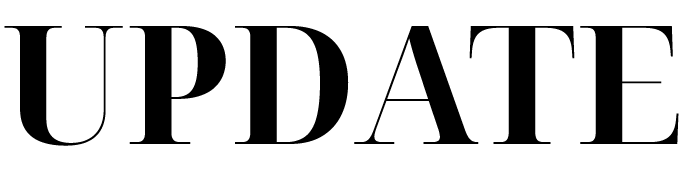
<style>
.page{position:relative;width:681px;height:175px;background:#ffffff}
.page>*{position:absolute;margin:0}
.t1{font:165px "NotoSerifDisplay-Bold";color:#000000}
</style>
<div class="page">
<p class="t1" style="left:4px;top:26px;width:675px;height:120px">UPDATE</p>
</div>
